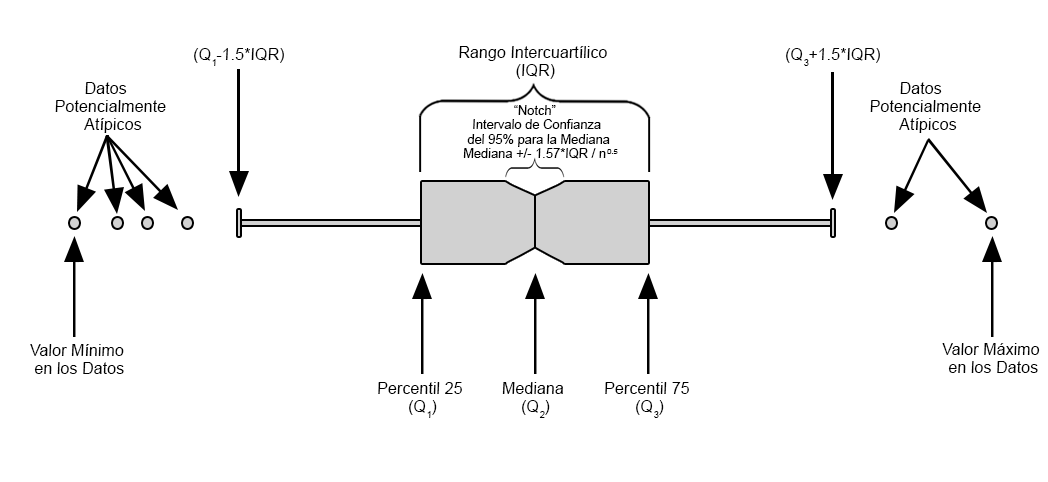
<style>
.page{position:relative;width:1048px;height:482px;background:#ffffff}
.page>*{position:absolute;margin:0}
.t1{font:16px "ArialMT";color:#000000;font-style:italic}
.t2{font:16px/18px "ArialMT";color:#000000;font-style:italic}
.t3{font:12.8px/14.3px "ArialMT";color:#000000;font-style:italic}
</style>
<div class="page">
<p class="t1" style="left:194px;top:48px;width:90px;height:18px">(Q1-1.5*IQR)</p>
<p class="t2" style="left:459px;top:46px;width:148px;height:33px;text-align:center">Rango Intercuartílico<br>(IQR)</p>
<p class="t1" style="left:786px;top:48px;width:94px;height:18px">(Q3+1.5*IQR)</p>
<p class="t2" style="left:55px;top:82px;width:111px;height:51px;text-align:center">Datos <br>Potencialmente<br>Atípicos</p>
<p class="t2" style="left:870px;top:82px;width:111px;height:51px;text-align:center">Datos <br>Potencialmente<br>Atípicos</p>
<p class="t3" style="left:463px;top:105px;width:155px;height:54px;text-align:center">“Notch”<br>Intervalo de Confianza<br>del 95% para la Mediana<br>Mediana +/- 1.57*IQR / n 0.5</p>
<p class="t2" style="left:30px;top:344px;width:94px;height:30px;text-align:center">Valor Mínimo<br>en los Datos</p>
<p class="t2" style="left:942px;top:343px;width:98px;height:30px;text-align:center">Valor Máximo<br>en los Datos</p>
<p class="t2" style="left:378px;top:382px;width:84px;height:36px;text-align:center">Percentil 25<br>(Q1)</p>
<p class="t2" style="left:502px;top:382px;width:61px;height:36px;text-align:center">Mediana<br>(Q2)</p>
<p class="t2" style="left:605px;top:382px;width:84px;height:36px;text-align:center">Percentil 75<br>(Q3)</p>
</div>
